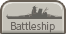
<style>
.page{position:relative;width:66px;height:34px;background:#c5c2b9}
.page>*{position:absolute;margin:0}
.t1{font:10px "UDShinGoPro-Light";color:#6a6560;scale:0.9 1}
</style>
<div class="page">
<p class="t1" style="left:11px;top:21px;width:44px;height:12px">Battleship</p>
</div>
